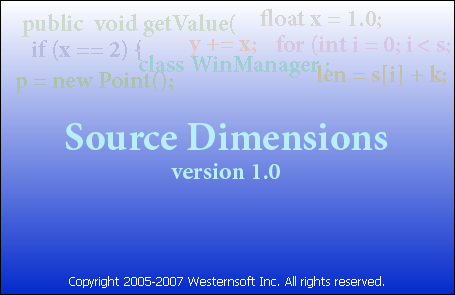
<style>
.page{position:relative;width:455px;height:295px}
.page>*{position:absolute;margin:0}
.t1{font:24px "MinionPro-Bold";color:#cdd9cb}
.t2{font:24px "MinionPro-Bold";color:#d6d4d4}
.t3{font:24px "MinionPro-Bold";color:#b8bae0}
.t4{font:24px "MinionPro-Bold";color:#e0c7c7}
.t5{font:24px "MinionPro-Bold";color:#d7c5e1}
.t6{font:24px "MinionPro-Bold";color:#9eced4}
.t7{font:24px "MinionPro-Bold";color:#c1c0a7}
.t8{font:24px "MinionPro-Bold";color:#a8c5a5}
.t9{font:40px "MinionPro-Bold";color:#b6f0f4}
.t10{font:24px "MinionPro-Bold";color:#b6f0f4}
.t11{font:12px "Tahoma";color:#ffffff}
.t12{font:10.7px "CourierNewPSMT";color:#ffffff}
</style>
<div class="page">
<p class="t1" style="left:22px;top:14px;width:213px;height:23px">public  void getValue(</p>
<p class="t2" style="left:260px;top:9px;width:121px;height:20px">float x = 1.0;</p>
<p class="t3" style="left:32px;top:40px;width:110px;height:21px">if (x == 2) {</p>
<p class="t4" style="left:189px;top:39px;width:67px;height:18px">y += x;</p>
<p class="t5" style="left:276px;top:35px;width:174px;height:21px">for (int i = 0; i &lt; s;</p>
<p class="t6" style="left:139px;top:55px;width:190px;height:23px">class WinManager :</p>
<p class="t7" style="left:317px;top:65px;width:129px;height:21px">len = s[i] + k;</p>
<p class="t8" style="left:15px;top:71px;width:158px;height:23px">p = new Point();</p>
<p class="t9" style="left:65px;top:123px;width:323px;height:56px;text-align:center">Source Dimensions<br><span class="t10">version 1.0</span></p>
<p class="t11" style="left:69px;top:276px;width:315px;height:12px"><span class="t12"><br></span>Copyright 2005-2007 Westernsoft Inc. All rights reserved.</p>
</div>
